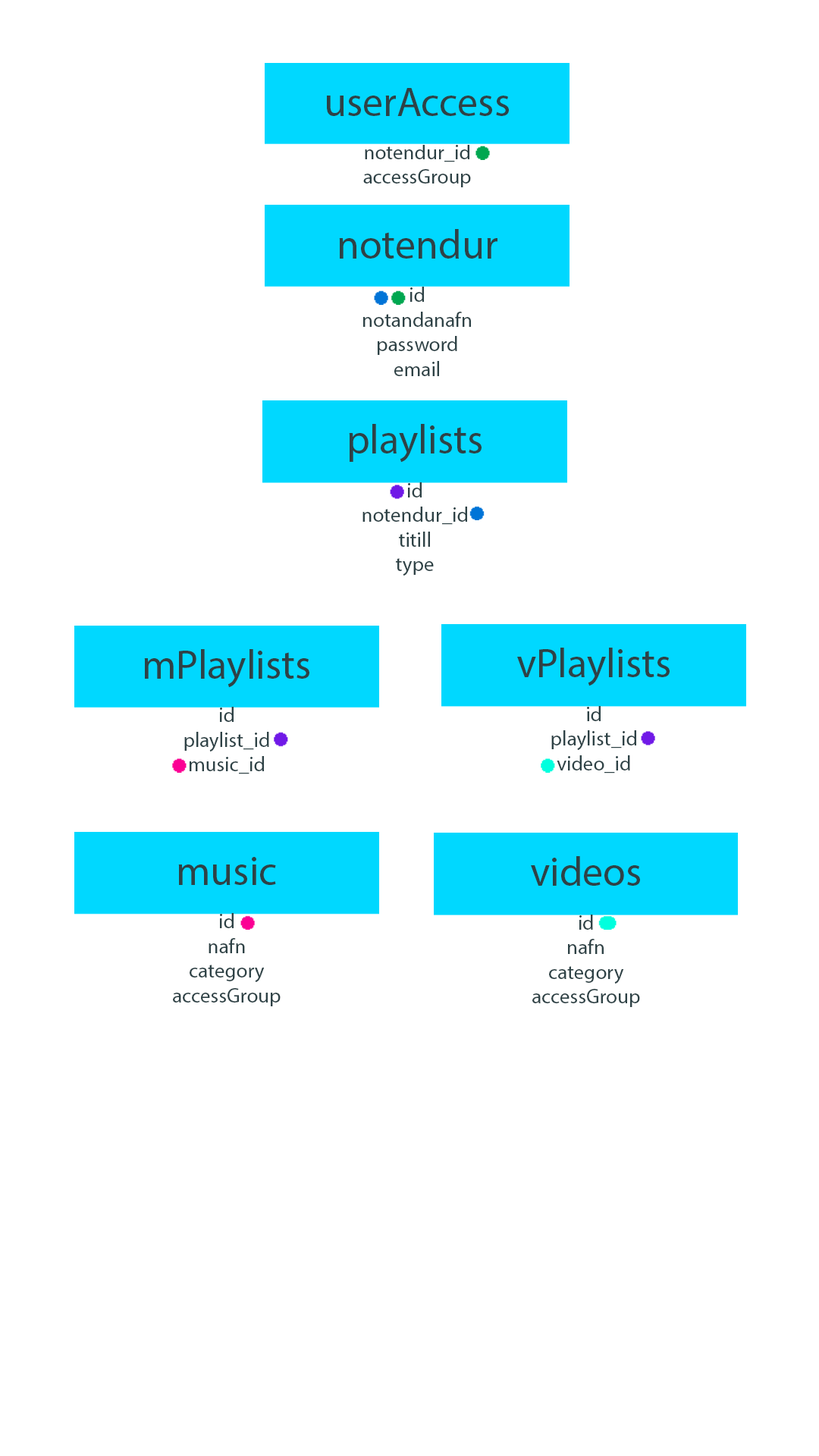
<style>
.page{position:relative;width:819px;height:1456px;background:#ffffff}
.page>*{position:absolute;margin:0}
.t1{font:40.9px "MyriadPro-Regular";color:#2e4246}
.t2{font:20.4px "MyriadPro-Regular";color:#2e4246}
.t3{font:41px "MyriadPro-Regular";color:#2e4246}
.t4{font:20.5px "MyriadPro-Regular";color:#2e4246}
.t5{font:41.1px "MyriadPro-Regular";color:#2e4246}
</style>
<div class="page">
<p class="t1" style="left:327px;top:88px;width:182px;height:28px">userAccess</p>
<p class="t2" style="left:363px;top:145px;width:108px;height:42px;text-align:center">notendur_id<br>accessGroup</p>
<p class="t3" style="left:339px;top:229px;width:158px;height:30px">notendur</p>
<p class="t4" style="left:363px;top:287px;width:108px;height:89px;text-align:center">id<br>notandanafn<br>password<br>email</p>
<p class="t5" style="left:349px;top:424px;width:133px;height:39px">playlists</p>
<p class="t4" style="left:362px;top:482px;width:105px;height:94px;text-align:center">id<br>notendur_id<br>titill<br>type</p>
<p class="t5" style="left:144px;top:649px;width:165px;height:39px">mPlaylists</p>
<p class="t5" style="left:517px;top:648px;width:153px;height:38px">vPlaylists</p>
<p class="t4" style="left:184px;top:707px;width:85px;height:67px;text-align:center">id<br>playlist_id<br>music_id</p>
<p class="t4" style="left:551px;top:706px;width:85px;height:67px;text-align:center">id<br>playlist_id<br>video_id</p>
<p class="t5" style="left:178px;top:857px;width:98px;height:28px">music</p>
<p class="t5" style="left:531px;top:856px;width:109px;height:30px">videos</p>
<p class="t4" style="left:173px;top:913px;width:108px;height:93px;text-align:center">id<br>nafn<br>category<br>accessGroup</p>
<p class="t4" style="left:532px;top:915px;width:108px;height:92px;text-align:center">id<br>nafn<br>category<br>accessGroup</p>
</div>
